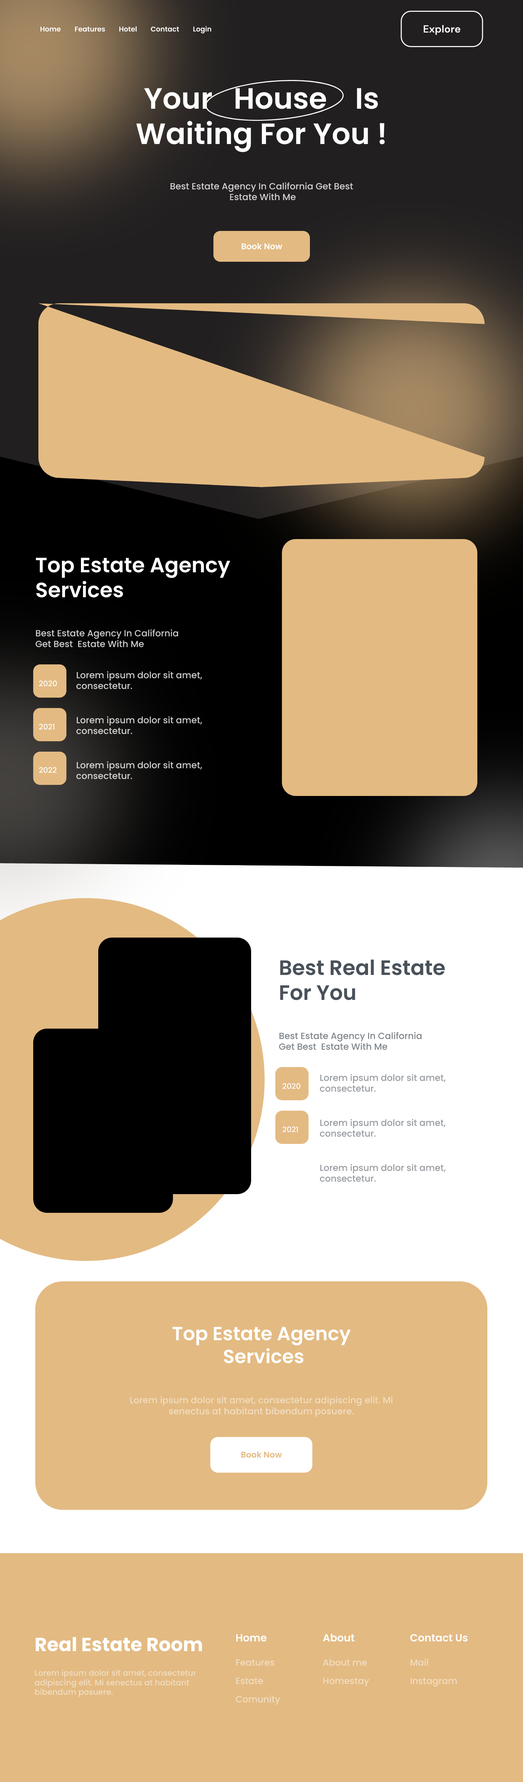
<style>
.page{position:relative;width:523px;height:1782px;background:#e3ba82}
.page>*{position:absolute;margin:0}
.t1{font:6.9px "Poppins-SemiBold";color:#ffffff}
.t2{font:10.4px "DMSans-Bold";color:#ffffff}
.t3{font:29.4px "Poppins-SemiBold";color:#ffffff}
.t4{font:9px "Poppins-Medium";color:#d3d2d2}
.t5{font:8.3px "Poppins-SemiBold";color:#ffffff}
.t6{font:20.8px "Poppins-SemiBold";color:#ffffff}
.t7{font:9px "Poppins-Medium";color:#cdcdcd}
.t8{font:9px "Poppins-Medium";color:#cecece}
.t9{font:7.6px "Poppins-Medium";color:#ffffff}
.t10{font:9px "Poppins-Medium";color:#d0d0d0}
.t11{font:9px "Poppins-Medium";color:#d2d2d1}
.t12{font:20.8px "Poppins-SemiBold";color:#49515a}
.t13{font:9px "Poppins-Medium";color:#80868c}
.t14{font:9px "Poppins-Medium";color:#999da2}
.t15{font:19px "Poppins-SemiBold";color:#ffffff}
.t16{font:9px "Poppins-Medium";color:#f1ddc1}
.t17{font:8.3px "Poppins-SemiBold";color:#e3ba82}
.t18{font:19px "Poppins-Bold";color:#ffffff}
.t19{font:10.4px "Poppins-SemiBold";color:#ffffff}
.t20{font:8px "Poppins-Medium";color:#f1ddc1}
</style>
<div class="page">
<p class="t1" style="left:40px;top:27px;width:21px;height:5px">Home</p>
<p class="t1" style="left:75px;top:27px;width:30px;height:5px">Features</p>
<p class="t1" style="left:119px;top:26px;width:18px;height:6px">Hotel</p>
<p class="t1" style="left:151px;top:26px;width:28px;height:6px">Contact</p>
<p class="t1" style="left:193px;top:26px;width:19px;height:8px">Login</p>
<p class="t2" style="left:424px;top:25px;width:37px;height:10px">Explore</p>
<p class="t3" style="left:136px;top:88px;width:249px;height:64px;text-align:center">Your   House    Is <br>Waiting For You !</p>
<p class="t4" style="left:170px;top:182px;width:183px;height:18px;text-align:center">Best Estate Agency In California Get Best <br> Estate With Me</p>
<p class="t5" style="left:242px;top:243px;width:40px;height:7px">Book Now</p>
<p class="t6" style="left:36px;top:558px;width:195px;height:39px">Top Estate Agency Services</p>
<p class="t7" style="left:35px;top:629px;width:143px;height:18px">Best Estate Agency In California<br>Get Best  Estate With Me</p>
<p class="t8" style="left:76px;top:671px;width:126px;height:18px">Lorem ipsum dolor sit amet, consectetur.</p>
<p class="t9" style="left:39px;top:680px;width:18px;height:6px">2020</p>
<p class="t9" style="left:39px;top:723px;width:16px;height:6px">2021</p>
<p class="t10" style="left:76px;top:716px;width:126px;height:18px">Lorem ipsum dolor sit amet, consectetur.</p>
<p class="t11" style="left:76px;top:761px;width:126px;height:18px">Lorem ipsum dolor sit amet, consectetur.</p>
<p class="t9" style="left:39px;top:767px;width:18px;height:6px">2022</p>
<p class="t12" style="left:280px;top:959px;width:165px;height:41px">Best Real Estate <br>For You</p>
<p class="t13" style="left:279px;top:1032px;width:143px;height:18px">Best Estate Agency In California<br>Get Best  Estate With Me</p>
<p class="t14" style="left:320px;top:1073px;width:126px;height:19px">Lorem ipsum dolor sit amet, consectetur.</p>
<p class="t9" style="left:283px;top:1083px;width:18px;height:6px">2020</p>
<p class="t14" style="left:320px;top:1118px;width:126px;height:19px">Lorem ipsum dolor sit amet, consectetur.</p>
<p class="t9" style="left:283px;top:1126px;width:15px;height:6px">2021</p>
<p class="t14" style="left:320px;top:1163px;width:126px;height:19px">Lorem ipsum dolor sit amet, consectetur.</p>
<p class="t15" style="left:172px;top:1326px;width:179px;height:37px;text-align:center">Top Estate Agency<br> Services</p>
<p class="t16" style="left:130px;top:1396px;width:263px;height:20px;text-align:center">Lorem ipsum dolor sit amet, consectetur adipiscing elit. Mi senectus at habitant bibendum posuere.</p>
<p class="t17" style="left:241px;top:1451px;width:41px;height:7px">Book Now</p>
<p class="t18" style="left:36px;top:1637px;width:166px;height:14px">Real Estate Room</p>
<p class="t19" style="left:236px;top:1634px;width:31px;height:7px">Home</p>
<p class="t19" style="left:323px;top:1633px;width:32px;height:8px">About</p>
<p class="t19" style="left:411px;top:1634px;width:57px;height:7px">Contact Us</p>
<p class="t16" style="left:236px;top:1659px;width:39px;height:7px">Features</p>
<p class="t16" style="left:323px;top:1658px;width:44px;height:8px">About me</p>
<p class="t16" style="left:411px;top:1658px;width:18px;height:8px">Mail</p>
<p class="t20" style="left:35px;top:1669px;width:161px;height:28px">Lorem ipsum dolor sit amet, consectetur adipiscing elit. Mi senectus at habitant bibendum posuere.</p>
<p class="t16" style="left:236px;top:1677px;width:27px;height:7px">Estate</p>
<p class="t16" style="left:323px;top:1677px;width:46px;height:9px">Homestay</p>
<p class="t16" style="left:411px;top:1677px;width:46px;height:9px">Instagram</p>
<p class="t16" style="left:236px;top:1695px;width:44px;height:9px">Comunity</p>
</div>
